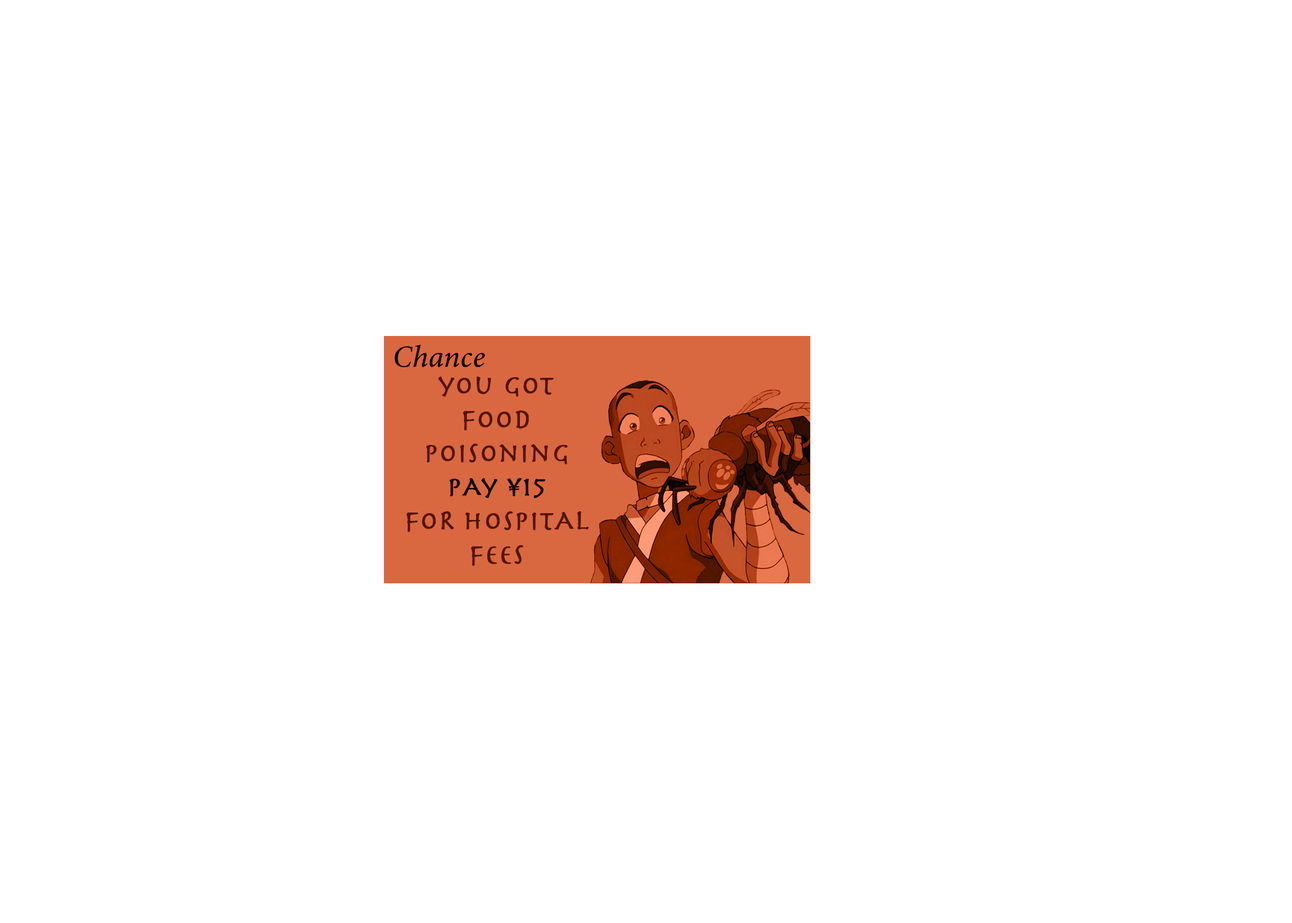
<style>
.page{position:relative;width:1292px;height:923px;background:#ffffff}
.page>*{position:absolute;margin:0}
.t1{font:30.8px "MinionConceptItalic-MediumItalic";color:#000000;font-weight:bold}
.t2{font:28.2px "Herculanum";color:#4e1501;font-weight:bold}
</style>
<div class="page">
<p class="t1" style="left:394px;top:345px;width:91px;height:22px">Chance</p>
<p class="t2" style="left:406px;top:377px;width:183px;height:189px;text-align:center">you got<br>food<br>poisoning<br>pAy ¥15<br>foR hospitAl<br>fees</p>
</div>
